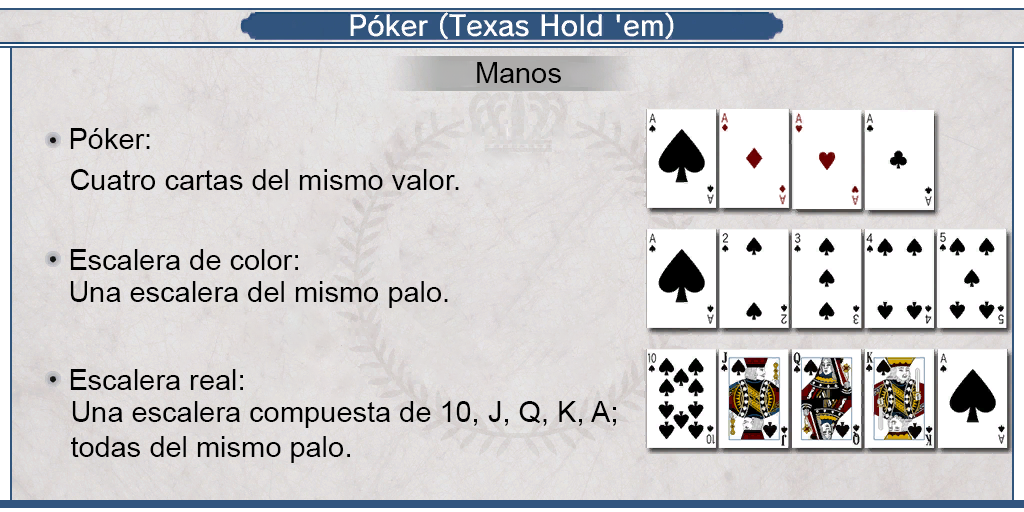
<style>
.page{position:relative;width:1024px;height:512px}
.page>*{position:absolute;margin:0}
.t1{font:29px "ArialMT";color:#000000}
</style>
<div class="page">
<p class="t1" style="left:477px;top:62px;width:84px;height:21px">Manos</p>
<p class="t1" style="left:70px;top:128px;width:80px;height:21px">Póker:</p>
<p class="t1" style="left:70px;top:169px;width:389px;height:21px">Cuatro cartas del mismo valor.</p>
<p class="t1" style="left:70px;top:249px;width:228px;height:21px">Escalera de color:</p>
<p class="t1" style="left:70px;top:281px;width:378px;height:27px">Una escalera del mismo palo.</p>
<p class="t1" style="left:70px;top:369px;width:173px;height:21px">Escalera real:</p>
<p class="t1" style="left:71px;top:401px;width:545px;height:62px">Una escalera compuesta de 10, J, Q, K, A;<br>todas del mismo palo.</p>
</div>
